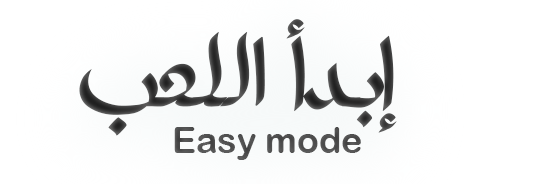
<style>
.page{position:relative;width:533px;height:184px;background:#ffffff}
.page>*{position:absolute;margin:0}
.t1{font:120px "Khediawy";color:#3a3a3a}
.t2{font:36px "ArialRoundedMTBold";color:#505050}
</style>
<div class="page">
<p class="t1" style="left:79px;top:19px;width:318px;height:117px">إبدأ اللعب</p>
<p class="t2" style="left:174px;top:127px;width:187px;height:33px">Easy mode</p>
</div>
